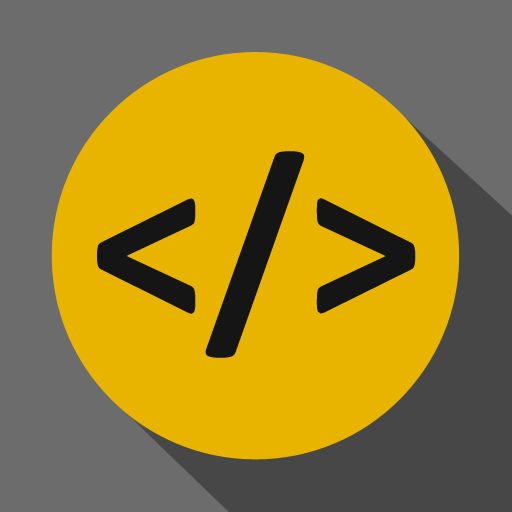
<style>
.page{position:relative;width:512px;height:512px;background:#e8b400}
.page>*{position:absolute;margin:0}
.t1{font:233.9px "Calibri-Bold";letter-spacing:-0.03em;color:#151515;font-weight:bold}
</style>
<div class="page">
<p class="t1" style="left:97px;top:151px;width:319px;height:207px">&lt;/&gt;</p>
</div>
